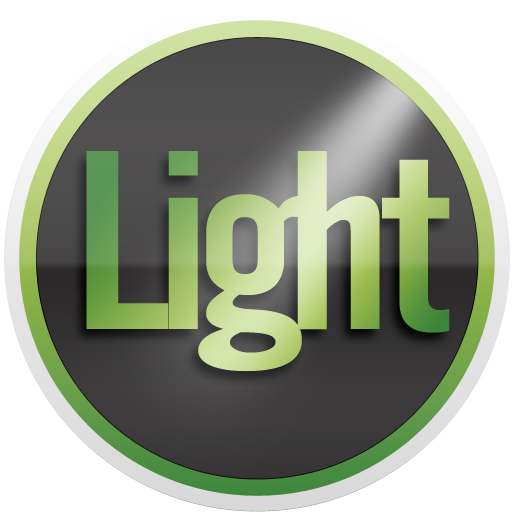
<style>
.page{position:relative;width:512px;height:512px;background:#ffffff}
.page>*{position:absolute;margin:0}
.t1{font:252.2px "AlternateGothicNo2BT-Regular";letter-spacing:-0.05em;scale:1.17 1}
</style>
<div class="page">
<p class="t1" style="left:86px;top:151px;width:364px;height:221px">Light</p>
</div>
